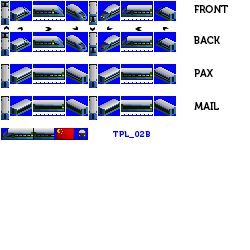
<style>
.page{position:relative;width:250px;height:250px;background:#ffffff}
.page>*{position:absolute;margin:0}
.t1{font:10px "Museo700-Regular";color:#000000;text-transform:uppercase}
.t2{font:8px "Museo700-Regular";letter-spacing:0.075em;color:#0000ff;text-transform:uppercase}
</style>
<div class="page">
<p class="t1" style="left:194px;top:5px;width:34px;height:8px">front</p>
<p class="t1" style="left:193px;top:36px;width:27px;height:8px">back</p>
<p class="t1" style="left:194px;top:69px;width:19px;height:8px">pax</p>
<p class="t1" style="left:194px;top:102px;width:25px;height:8px">mail</p>
<p class="t2" style="left:113px;top:131px;width:37px;height:7px">tpl_02b</p>
</div>
